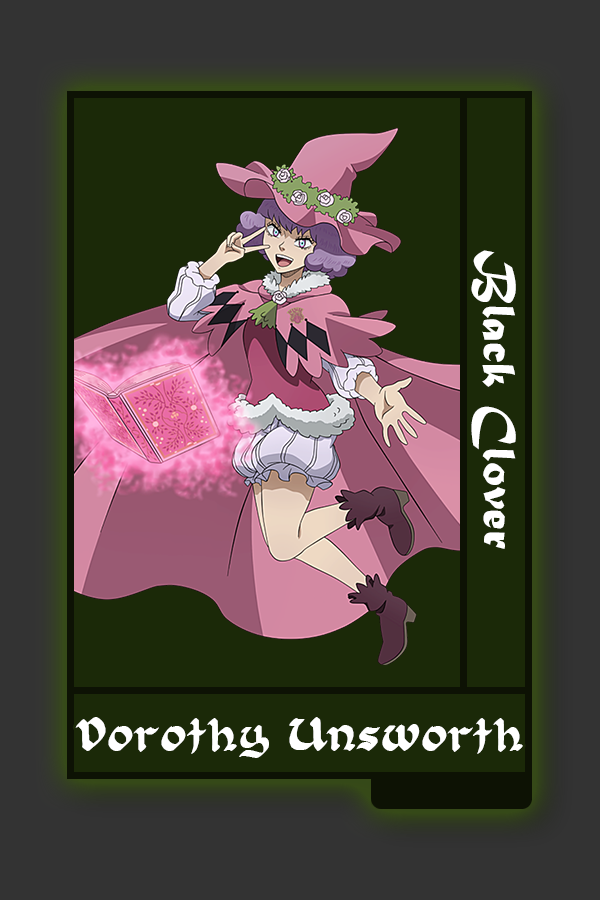
<style>
.page{position:relative;width:600px;height:900px;background:#1b2908}
.page>*{position:absolute;margin:0}
.t1{font:48.8px "MaturaMTScriptCapitals";color:#ffffff}
.t2{font:40px "FloranteatLaura";color:#ffffff}
</style>
<div class="page">
<p class="t1" style="left:471px;top:250px;width:45px;height:299px;rotate:90deg">Black Clover</p>
<p class="t2" style="left:75px;top:717px;width:448px;height:41px">Dorothy Unsworth</p>
</div>
